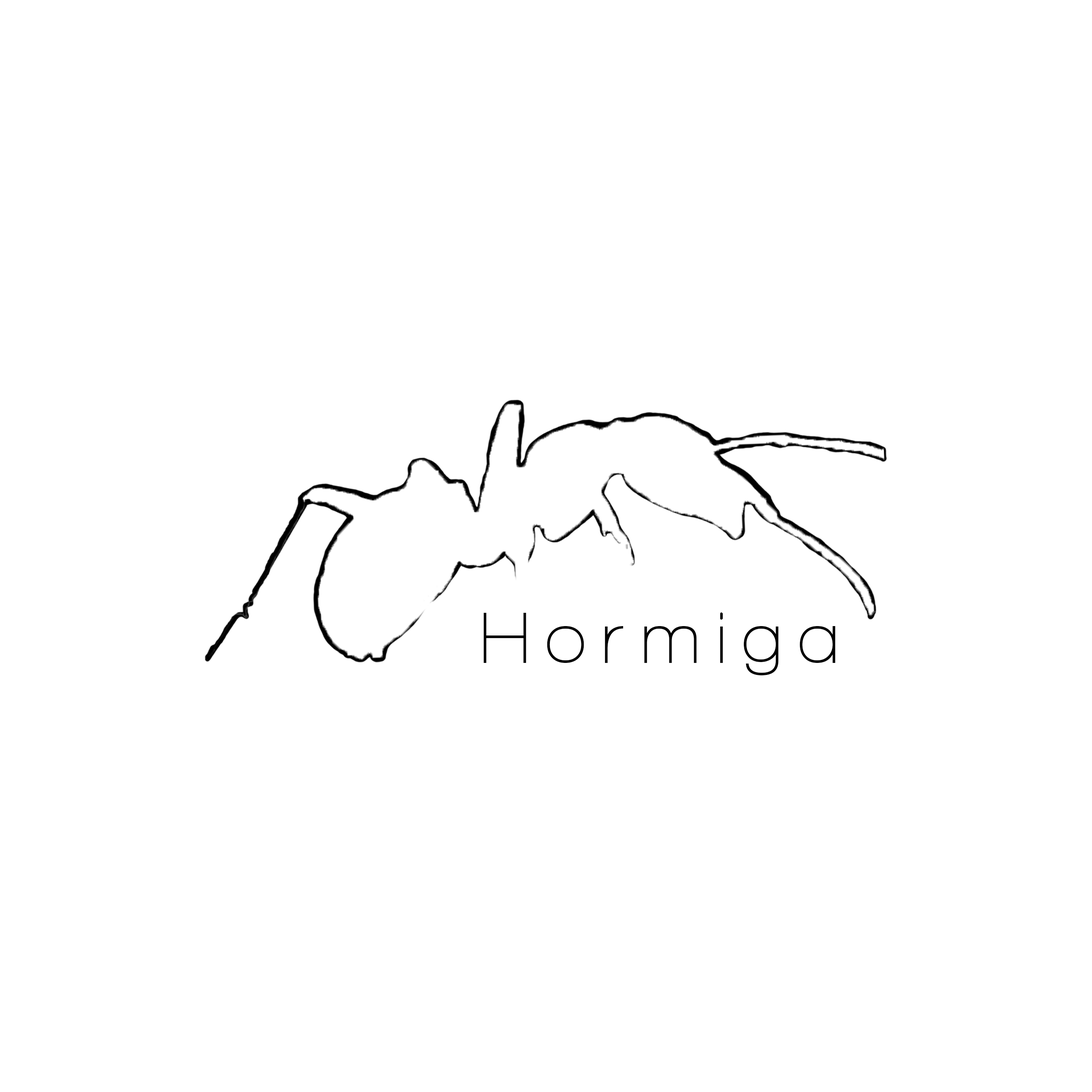
<style>
.page{position:relative;width:1092px;height:1092px;background:#ffffff}
.page>*{position:absolute;margin:0}
.t1{font:73px "WalkwaySemiBold";letter-spacing:0.22em;color:#000000}
</style>
<div class="page">
<p class="t1" style="left:483px;top:612px;width:352px;height:63px">Hormiga</p>
</div>
